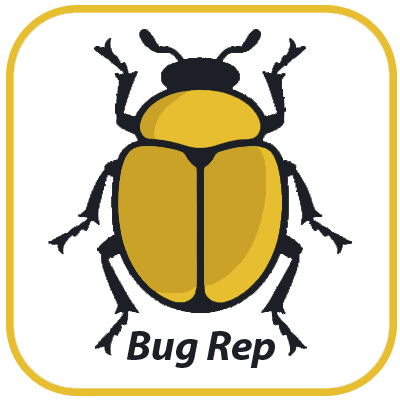
<style>
.page{position:relative;width:400px;height:400px;background:#ffffff}
.page>*{position:absolute;margin:0}
.t1{font:42.9px "MyriadPro-BoldIt";color:#1c2026}
</style>
<div class="page">
<p class="t1" style="left:127px;top:331px;width:148px;height:37px">Bug Rep</p>
</div>
